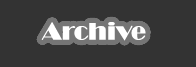
<style>
.page{position:relative;width:196px;height:67px;background:#333333}
.page>*{position:absolute;margin:0}
.t1{font:25px "Broadway";color:#ffffff}
</style>
<div class="page">
<p class="t1" style="left:41px;top:22px;width:105px;height:19px">Archive</p>
</div>
